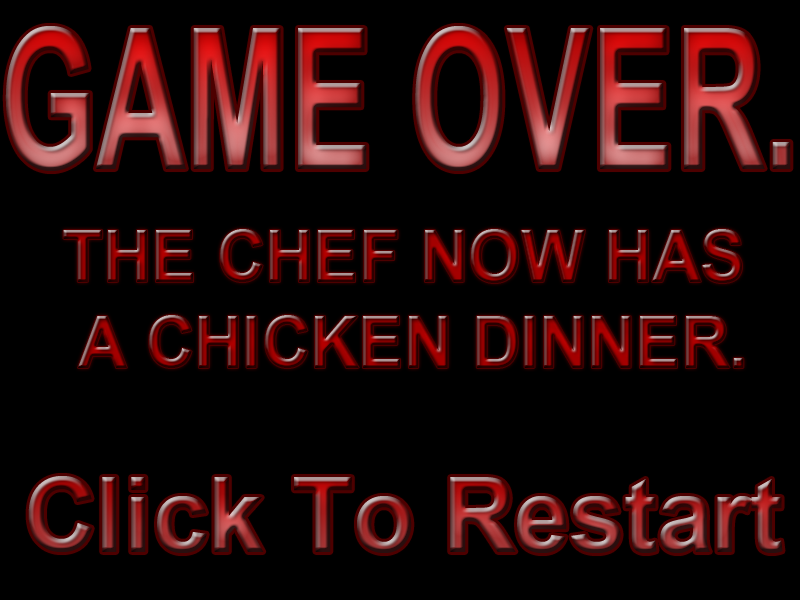
<style>
.page{position:relative;width:800px;height:600px;background:#000000}
.page>*{position:absolute;margin:0}
.t1{font:197.4px "Arial-BoldMT";scale:0.63 1}
.t2{font:72.1px "Arial-BoldMT";scale:0.94 1}
.t3{font:104px "Arial-BoldMT";scale:0.97 1}
</style>
<div class="page">
<p class="t1" style="left:5px;top:26px;width:786px;height:145px">GAME OVER.</p>
<p class="t2" style="left:63px;top:229px;width:681px;height:139px;text-align:center">THE CHEF NOW HAS <br>A CHICKEN DINNER.</p>
<p class="t3" style="left:28px;top:476px;width:755px;height:77px">Click To Restart</p>
</div>
